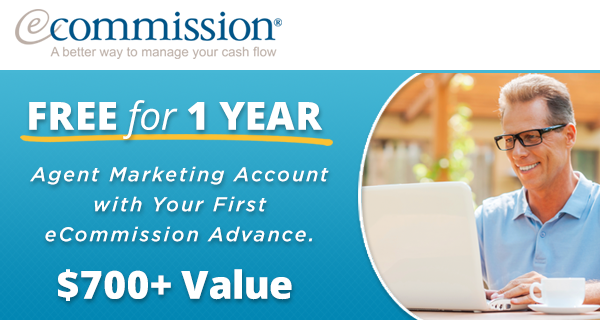
<style>
.page{position:relative;width:600px;height:320px;background:#ffffff}
.page>*{position:absolute;margin:0}
.t1{font:38.8px "OpenSans-Extrabold";color:#ffffff}
.t2{font:38.8px "OpenSans-Italic";color:#ffffff}
.t3{font:20px/30px "Gotham-MediumItalic";letter-spacing:0.1em;color:#ffffff}
</style>
<div class="page">
<p class="t1" style="left:29px;top:100px;width:294px;height:39px">FREE <span class="t2">for</span> 1 YEAR</p>
<p class="t3" style="left:30px;top:166px;width:299px;height:76px;text-align:center">Agent Marketing Account with Your First eCommission Advance.</p>
<p class="t1" style="left:58px;top:269px;width:234px;height:32px">$700+ Value</p>
</div>
